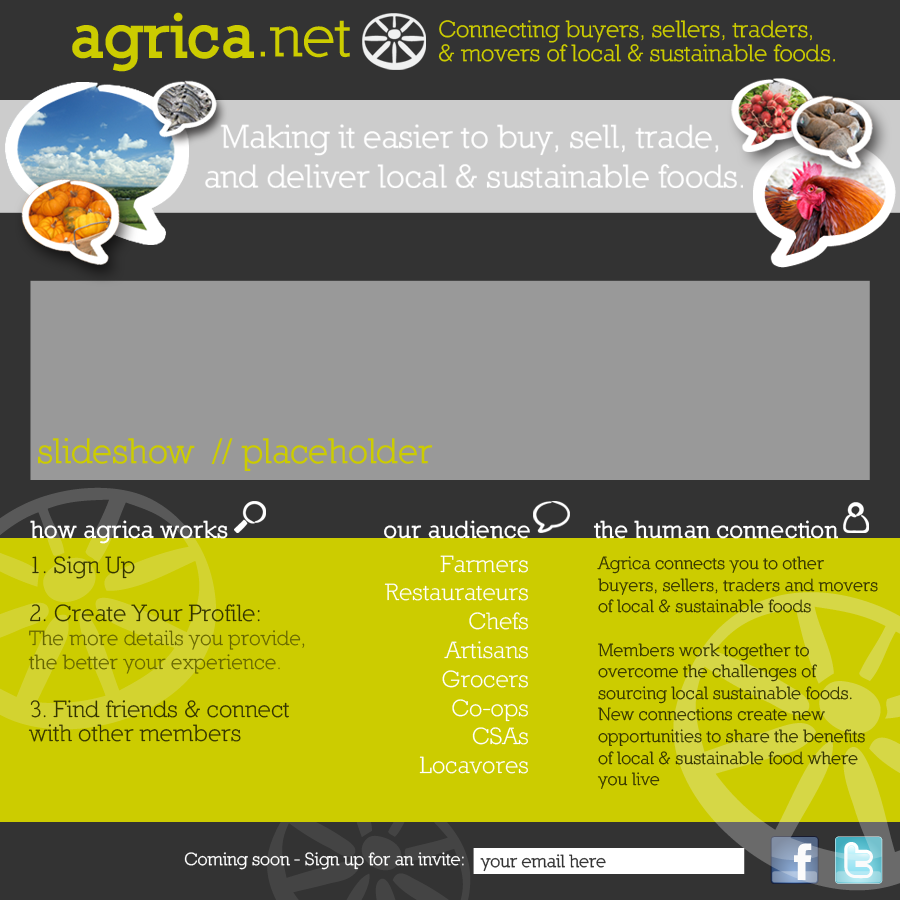
<style>
.page{position:relative;width:900px;height:900px;background:#333333}
.page>*{position:absolute;margin:0}
.t1{font:24px "Nilland-SmallCaps-Bold";color:#ffffff}
.t2{font:21px/24px "Nilland";color:#666600}
.t3{font:24px/24px "Nilland";color:#333300}
.t4{font:24px "Nilland";color:#ffffff}
.t5{font:18px "Nilland";color:#333300}
</style>
<div class="page">
<p class="t1" style="left:30px;top:520px;width:198px;height:24px">how agrica works</p>
<p class="t1" style="left:384px;top:520px;width:146px;height:19px">our audience</p>
<p class="t1" style="left:593px;top:520px;width:246px;height:19px">the human connection</p>
<p class="t2" style="left:28px;top:556px;width:277px;height:186px"><span class="t3">1. Sign Up<br><br>2. Create Your Profile:<br></span>The more details you provide, <br>the better your experience.<br><br><span class="t3">3. Find friends &amp; connect <br>with other members</span></p>
<p class="t4" style="left:384px;top:555px;width:144px;height:219px;text-align:right">Farmers<br>Restaurateurs<br>Chefs<br>Artisans<br>Grocers<br>Co-ops<br>CSAs<br>Locavores</p>
<p class="t5" style="left:597px;top:556px;width:281px;height:233px">Agrica connects you to other <br>buyers, sellers, traders and movers <br>of local &amp; sustainable foods  <br><br>Members work together to <br>overcome the challenges of <br>sourcing local sustainable foods.<br>New connections create new <br>opportunities to share the benefits <br>of local &amp; sustainable food where <br>you live</p>
</div>
